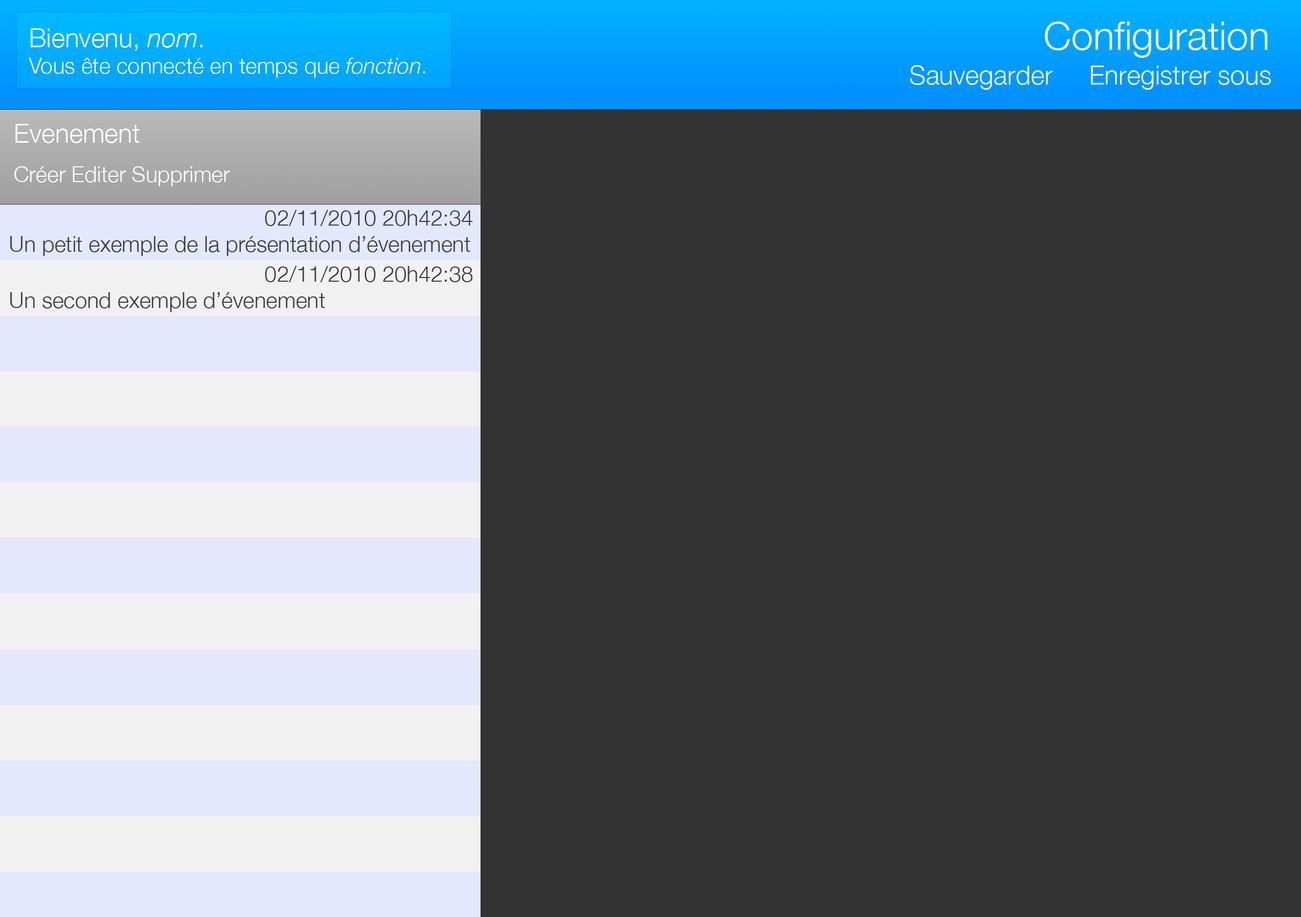
<style>
.page{position:relative;width:1301px;height:917px;background:#333333}
.page>*{position:absolute;margin:0}
.t1{font:21.9px "HelveticaNeue-Light";color:#ffffff}
.t2{font:26.2px "HelveticaNeue-Light";color:#ffffff}
.t3{font:26.2px "HelveticaNeue-LightItalic";color:#ffffff}
.t4{font:21.9px "HelveticaNeue-LightItalic";color:#ffffff}
.t5{font:39.3px "HelveticaNeue-Light";color:#ffffff}
.t6{font:21.9px/39.3px "HelveticaNeue-Light";color:#ffffff}
.t7{font:26.2px/39.3px "HelveticaNeue-Light";color:#ffffff}
.t8{font:21.9px "HelveticaNeue-Light";color:#3c3c3c}
</style>
<div class="page">
<p class="t1" style="left:28px;top:28px;width:397px;height:50px"><span class="t2">Bienvenu, </span><span class="t3">nom</span><span class="t2">.<br></span>Vous ête connecté en temps que <span class="t4">fonction</span>.</p>
<p class="t5" style="left:1044px;top:22px;width:223px;height:36px">Configuration</p>
<p class="t2" style="left:909px;top:65px;width:362px;height:25px">Sauvegarder     Enregistrer sous</p>
<p class="t6" style="left:14px;top:124px;width:216px;height:62px"><span class="t7">Evenement<br></span>Créer Editer Supprimer</p>
<p class="t8" style="left:10px;top:210px;width:463px;height:46px;text-align:right">02/11/2010 20h42:34<br>Un petit exemple de la présentation d’évenement</p>
<p class="t8" style="left:10px;top:266px;width:463px;height:46px;text-align:right">02/11/2010 20h42:38<br>Un second exemple d’évenement</p>
</div>
